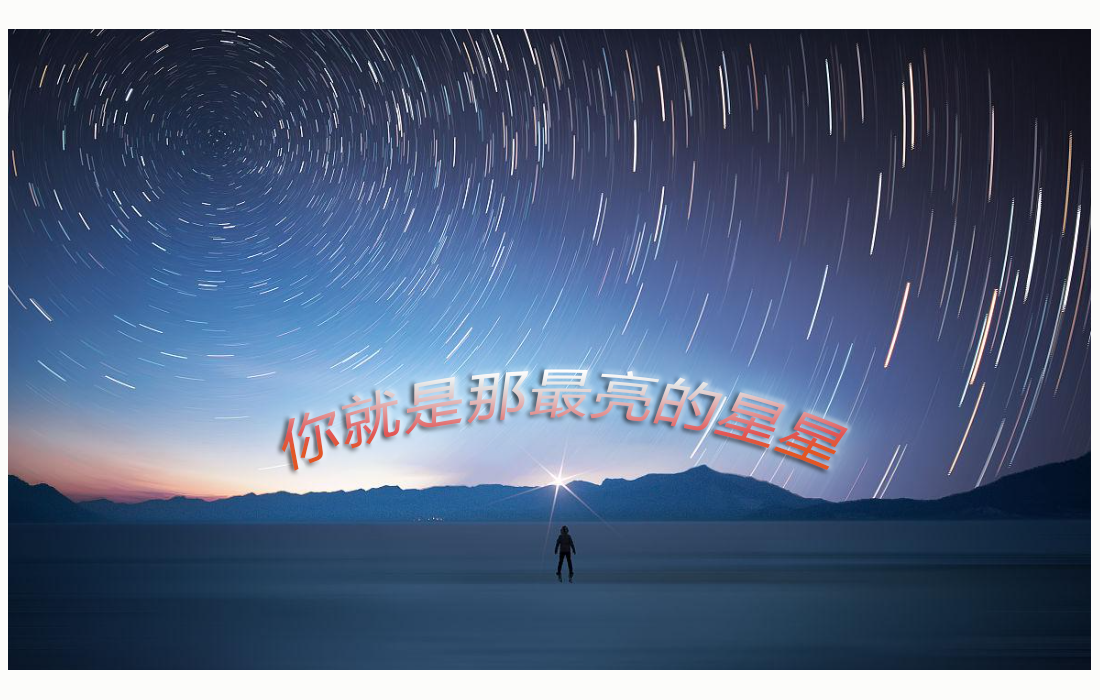
<style>
.page{position:relative;width:1100px;height:700px}
.page>*{position:absolute;margin:0}
.t1{font:52.2px "MicrosoftYaHei";letter-spacing:0.05em;font-style:italic;scale:1.09 1}
</style>
<div class="page">
<p class="t1" style="left:281px;top:369px;width:567px;height:102px">你就是那最亮的星星</p>
</div>
